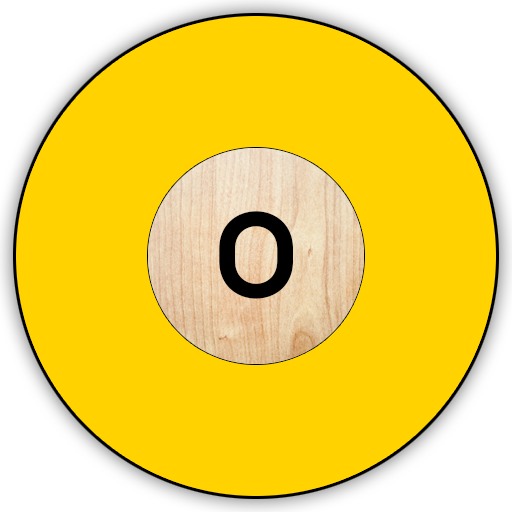
<style>
.page{position:relative;width:512px;height:512px;background:#ffd200}
.page>*{position:absolute;margin:0}
.t1{font:120px "NexaBold";color:#000000}
</style>
<div class="page">
<p class="t1" style="left:219px;top:211px;width:74px;height:88px">0</p>
</div>
